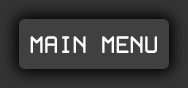
<style>
.page{position:relative;width:188px;height:88px;background:#404040}
.page>*{position:absolute;margin:0}
.t1{font:25px "WhiteRabbit";color:#ffffff}
</style>
<div class="page">
<p class="t1" style="left:30px;top:36px;width:127px;height:17px">MAIN MENU</p>
</div>
